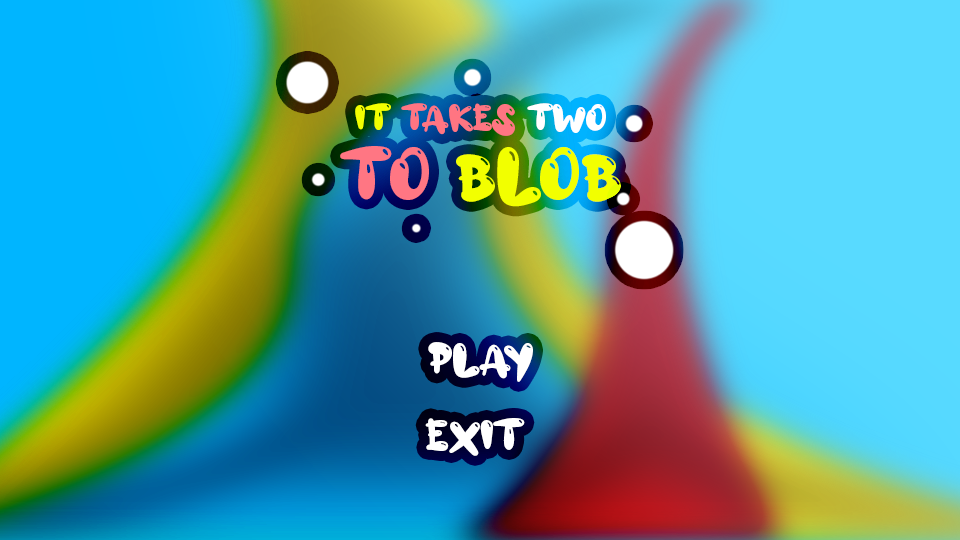
<style>
.page{position:relative;width:960px;height:540px}
.page>*{position:absolute;margin:0}
.t1{font:35.5px "aAlloyInk";color:#ff7582;text-transform:uppercase}
.t2{font:35.5px "aAlloyInk";color:#f2ff00;text-transform:uppercase}
.t3{font:35.5px "aAlloyInk";color:#ffffff;text-transform:uppercase}
.t4{font:70.9px/70.9px "aAlloyInk";color:#ff7683;text-transform:uppercase}
.t5{font:70.9px/70.9px "aAlloyInk";color:#f2ff00;text-transform:uppercase}
.t6{font:42.3px "aAlloyInk";color:#ffffff;text-transform:uppercase}
.t7{font:42.3px "aAlloyInk";letter-spacing:0.04em;color:#ffffff;text-transform:uppercase}
</style>
<div class="page">
<p class="t1" style="left:340px;top:103px;width:281px;height:104px;text-align:center"><span class="t2">it </span>takes<span class="t3"> two<br></span><span class="t4">to </span><span class="t5">blob</span></p>
<p class="t6" style="left:428px;top:342px;width:105px;height:40px">P<span class="t7">l</span>ay</p>
<p class="t6" style="left:425px;top:418px;width:100px;height:38px">Exit</p>
</div>
